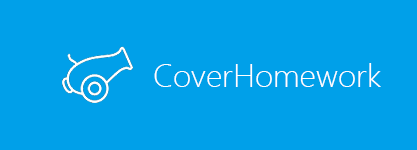
<style>
.page{position:relative;width:417px;height:150px;background:#00a0e9}
.page>*{position:absolute;margin:0}
.t1{font:30px "MicrosoftYaHeiUILight";color:#ffffff}
</style>
<div class="page">
<p class="t1" style="left:154px;top:63px;width:227px;height:24px">CoverHomework</p>
</div>
